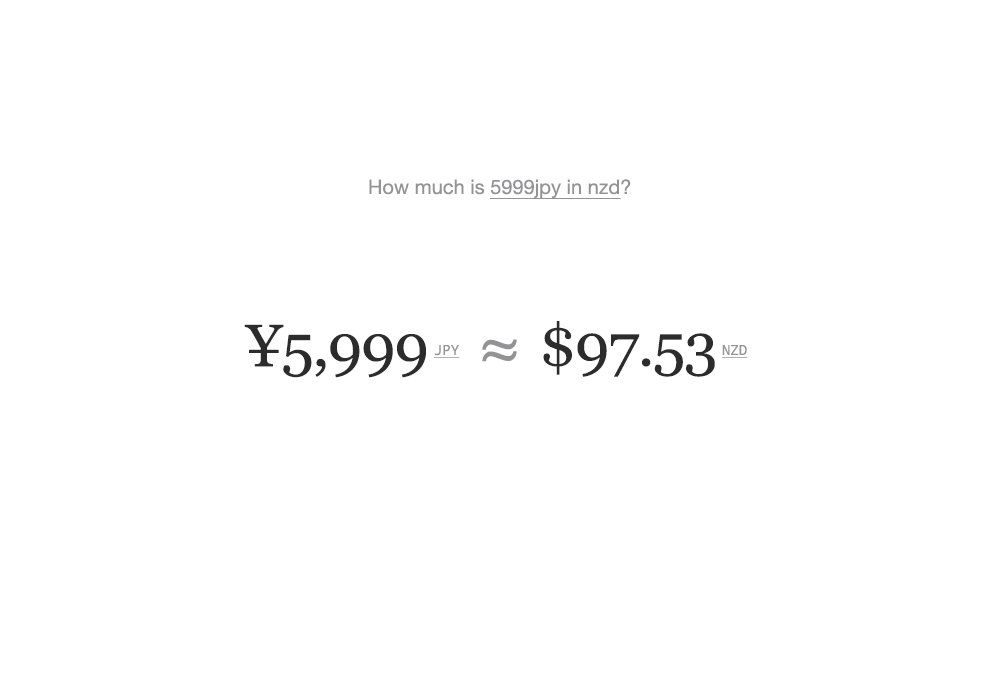
<style>
.page{position:relative;width:1000px;height:700px;background:#ffffff}
.page>*{position:absolute;margin:0}
.t1{font:20px "HelveticaNeue";color:#949295;text-decoration:underline}
.t2{font:20px "HelveticaNeue";color:#949295}
.t3{font:60px "Georgia";letter-spacing:-0.02em;color:#2c2c2c}
.t4{font:65.1px "HelveticaNeue";color:#949295}
.t5{font:14px "DroidSansMono";color:#949295;text-transform:uppercase;text-decoration:underline}
</style>
<div class="page">
<p class="t1" style="left:369px;top:179px;width:262px;height:20px"><span class="t2">How much is </span>5999jpy in nzd<span class="t2">?</span></p>
<p class="t3" style="left:244px;top:324px;width:182px;height:54px">¥5,999</p>
<p class="t3" style="left:543px;top:321px;width:172px;height:56px">$97.53</p>
<p class="t4" style="left:482px;top:339px;width:35px;height:23px">≈</p>
<p class="t5" style="left:434px;top:345px;width:26px;height:13px">JPY</p>
<p class="t5" style="left:722px;top:345px;width:26px;height:13px">NZD</p>
</div>
